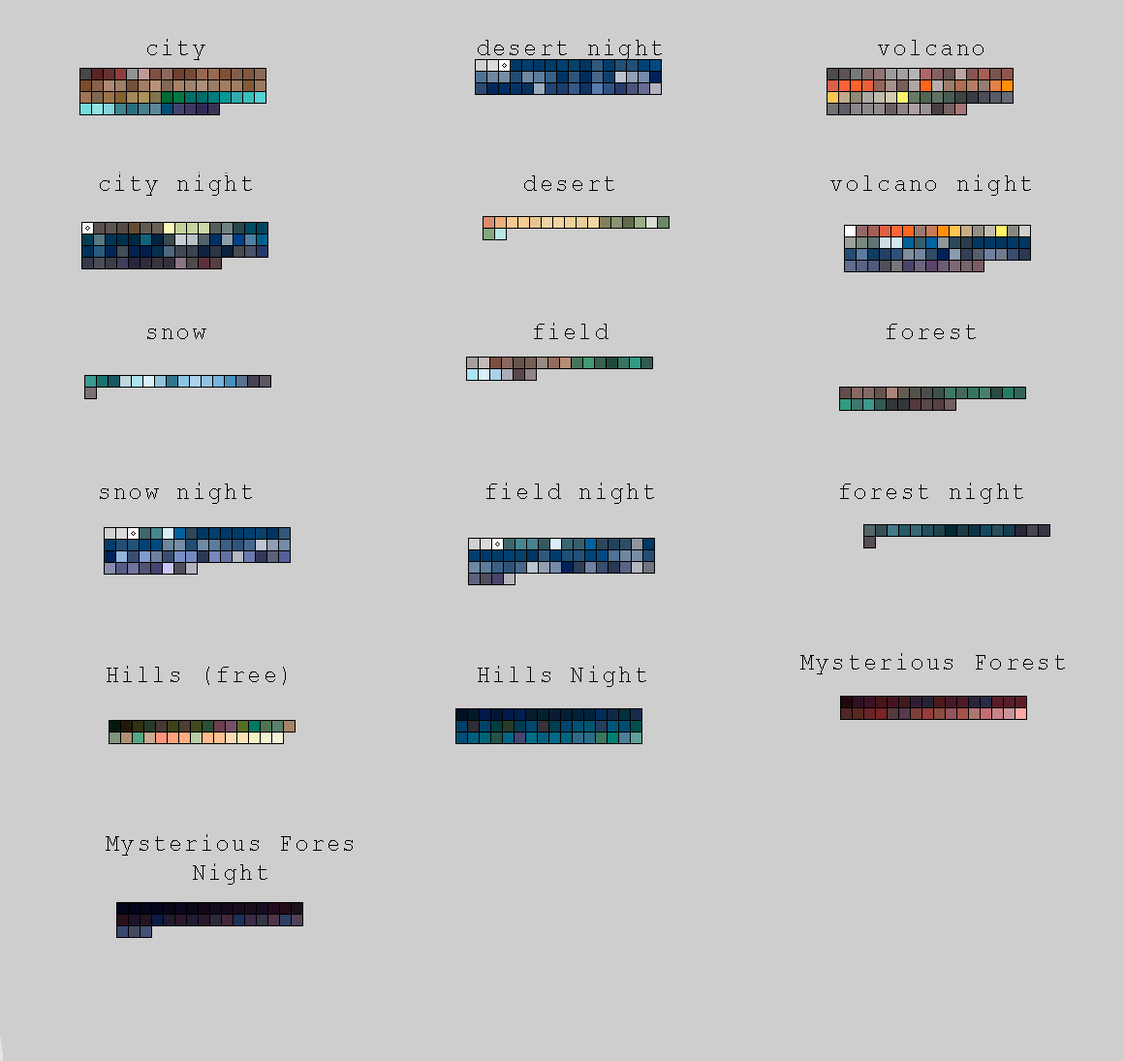
<style>
.page{position:relative;width:1124px;height:1061px;background:#cecece}
.page>*{position:absolute;margin:0}
.t1{font:24.2px "CourierNewPSMT";letter-spacing:0.1em;color:#000000;scale:0.92 1}
</style>
<div class="page">
<p class="t1" style="left:147px;top:39px;width:58px;height:21px">city</p>
<p class="t1" style="left:478px;top:39px;width:184px;height:21px">desert night</p>
<p class="t1" style="left:878px;top:40px;width:105px;height:15px">volcano</p>
<p class="t1" style="left:100px;top:174px;width:152px;height:22px">city night</p>
<p class="t1" style="left:524px;top:175px;width:90px;height:16px">desert</p>
<p class="t1" style="left:830px;top:174px;width:201px;height:22px">volcano night</p>
<p class="t1" style="left:147px;top:328px;width:59px;height:11px">snow</p>
<p class="t1" style="left:534px;top:323px;width:74px;height:16px">field</p>
<p class="t1" style="left:887px;top:324px;width:89px;height:15px">forest</p>
<p class="t1" style="left:100px;top:483px;width:152px;height:21px">snow night</p>
<p class="t1" style="left:486px;top:483px;width:168px;height:21px">field night</p>
<p class="t1" style="left:840px;top:483px;width:183px;height:21px">forest night</p>
<p class="t1" style="left:800px;top:653px;width:265px;height:21px">Mysterious Forest</p>
<p class="t1" style="left:107px;top:666px;width:179px;height:19px">Hills (free)</p>
<p class="t1" style="left:478px;top:666px;width:168px;height:21px">Hills Night</p>
<p class="t1" style="left:106px;top:834px;width:247px;height:51px;text-align:center">Mysterious Fores<br>Night</p>
</div>
